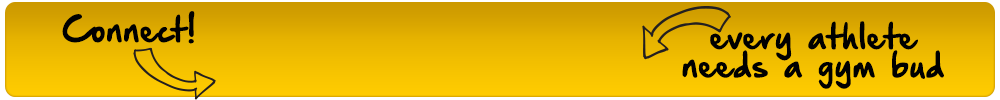
<style>
.page{position:relative;width:1000px;height:100px}
.page>*{position:absolute;margin:0}
.t1{font:30px "HandOfSeanDemo";color:#000000}
</style>
<div class="page">
<p class="t1" style="left:62px;top:11px;width:133px;height:33px">Connect!</p>
<p class="t1" style="left:710px;top:21px;width:208px;height:40px">every athlete</p>
<p class="t1" style="left:682px;top:50px;width:262px;height:39px">needs a gym bud</p>
</div>
